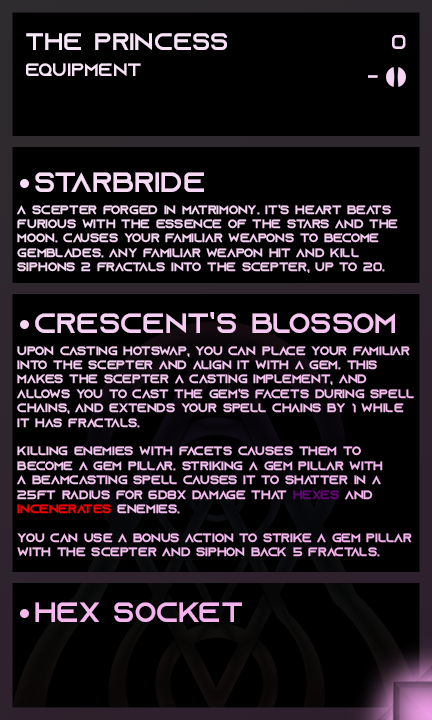
<style>
.page{position:relative;width:432px;height:720px;background:#000000}
.page>*{position:absolute;margin:0}
.t1{font:24px "AzonixRegular";color:#f7e4f7}
.t2{font:20px "AzonixRegular";color:#f6d8f5}
.t3{font:18px "AzonixRegular";color:#f7e4f7}
.t4{font:20px "AzonixRegular";color:#f6d7f4}
.t5{font:28px "AzonixRegular";color:#f6daf5}
.t6{font:12px "AzonixRegular";color:#f6d2f4}
.t7{font:28px "AzonixRegular";color:#f5caf2}
.t8{font:12px "AzonixRegular";color:#f5c0f0}
.t9{font:28px "AzonixRegular";color:#f4b5ee}
</style>
<div class="page">
<p class="t1" style="left:26px;top:33px;width:201px;height:17px">the princess</p>
<p class="t2" style="left:392px;top:35px;width:14px;height:14px">0</p>
<p class="t3" style="left:26px;top:63px;width:115px;height:13px">equipment</p>
<p class="t4" style="left:368px;top:75px;width:10px;height:3px">-</p>
<p class="t5" style="left:35px;top:172px;width:169px;height:20px">starbride</p>
<p class="t6" style="left:17px;top:204px;width:381px;height:69px">a scepter forged in matrimony. it’s heart beats <br>furious with the essence of the stars and the <br>moon. causes your familiar weapons to become <br>gemblades. any familiar weapon hit and kill <br>siphons 2 fractals into the scepter, up to 20.</p>
<p class="t7" style="left:35px;top:312px;width:360px;height:21px">crescent’s blossom</p>
<p class="t8" style="left:17px;top:346px;width:397px;height:211px">upon casting hotswap, you can place your familiar<br>into the scepter and align it with a gem. this <br>makes the scepter a casting implement, and <br>allows you to cast the gem’s facets during spell<br>chains, and extends your spell chains by 1 while <br>it has fractals. <br><br>killing enemies with facets causes them to <br>become a gem pillar. striking a gem pillar with<br>a beamcasting spell causes it to shatter in a <br>25ft radius for 6d8x damage that hexes and<br>incenerates enemies. <br><br>you can use a bonus action to strike a gem pillar <br>with the scepter and siphon back 5 fractals.</p>
<p class="t9" style="left:35px;top:602px;width:207px;height:20px">hex socket</p>
</div>
